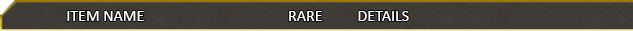
<style>
.page{position:relative;width:633px;height:31px}
.page>*{position:absolute;margin:0}
.t1{font:16px "Calibri";color:#ffffff}
</style>
<div class="page">
<p class="t1" style="left:67px;top:11px;width:77px;height:10px">ITEM NAME</p>
<p class="t1" style="left:289px;top:11px;width:33px;height:10px">RARE</p>
<p class="t1" style="left:358px;top:11px;width:51px;height:10px">DETAILS</p>
</div>
